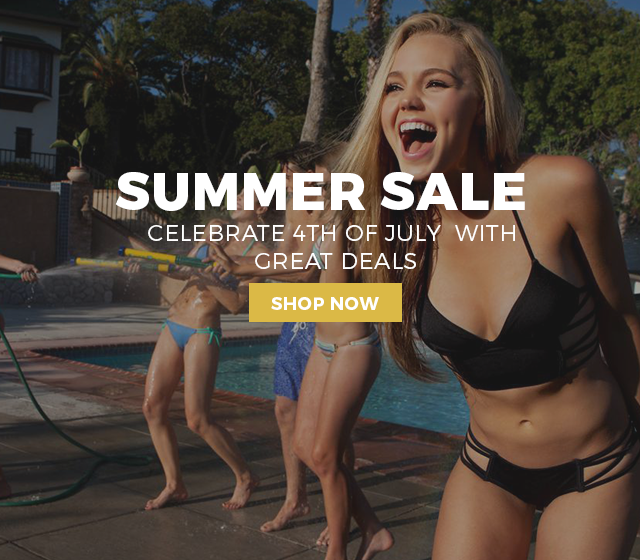
<style>
.page{position:relative;width:640px;height:560px}
.page>*{position:absolute;margin:0}
.t1{font:53px "Montserrat-ExtraBold";letter-spacing:0.025em;color:#ffffff}
.t2{font:22.9px "Montserrat-Light";letter-spacing:0.025em;color:#ffffff}
.t3{font:18.1px "Montserrat-Bold";letter-spacing:0.025em;color:#ffffff}
</style>
<div class="page">
<p class="t1" style="left:115px;top:172px;width:410px;height:39px">SUMMER SALE</p>
<p class="t2" style="left:148px;top:225px;width:367px;height:44px;text-align:center">CELEBRATE 4TH OF JULY  WITH <br>GREAT DEALS</p>
<p class="t3" style="left:271px;top:297px;width:108px;height:13px">SHOP NOW</p>
</div>
